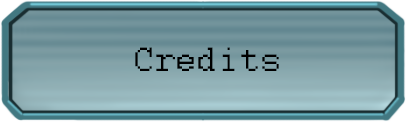
<style>
.page{position:relative;width:407px;height:122px}
.page>*{position:absolute;margin:0}
.t1{font:37.5px "Courier";color:#000000}
</style>
<div class="page">
<p class="t1" style="left:135px;top:47px;width:144px;height:24px">Credits</p>
</div>
